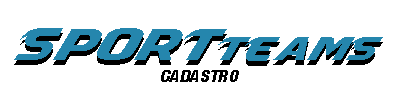
<style>
.page{position:relative;width:400px;height:100px;background:#ffffff}
.page>*{position:absolute;margin:0}
.t1{font:41.9px "Masque";color:#2586ad;text-transform:uppercase;font-style:italic;scale:1.27 1}
.t2{font:31.5px "Masque";color:#2586ad;text-transform:uppercase;font-style:italic;scale:1.27 1}
.t3{font:14.9px "Impact";color:#000000;text-transform:uppercase;font-style:italic;scale:1.27 1}
</style>
<div class="page">
<p class="t1" style="left:14px;top:28px;width:369px;height:33px">sport<span class="t2">teams</span></p>
<p class="t3" style="left:161px;top:70px;width:78px;height:12px">cadastro</p>
</div>
